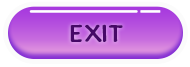
<style>
.page{position:relative;width:190px;height:67px}
.page>*{position:absolute;margin:0}
.t1{font:33.9px "Arabica";color:#460967}
</style>
<div class="page">
<p class="t1" style="left:70px;top:24px;width:53px;height:18px">exit</p>
</div>
